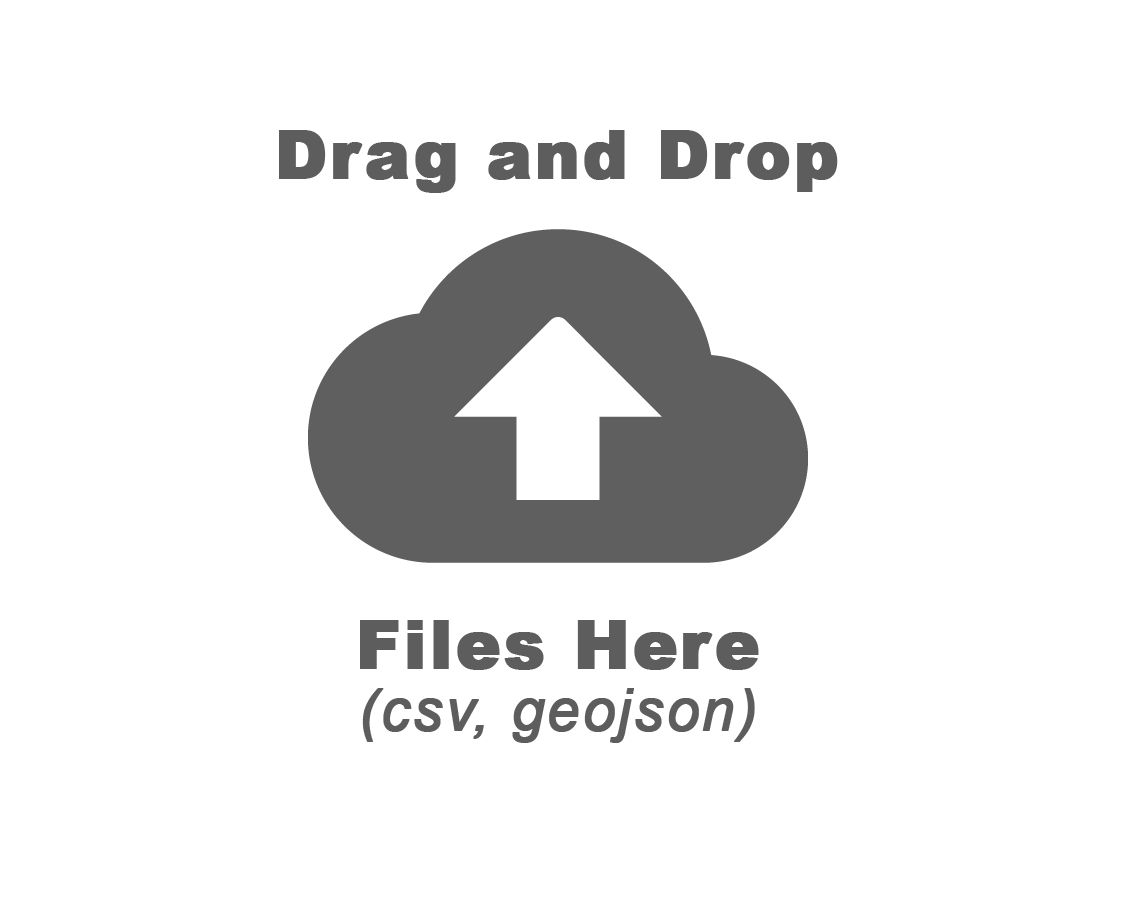
<style>
.page{position:relative;width:1125px;height:900px;background:#ffffff}
.page>*{position:absolute;margin:0}
.t1{font:66.7px "Arial-Black";letter-spacing:0.025em;color:#5e5d5d;font-weight:bold}
.t2{font:58.3px "Arial-ItalicMT";letter-spacing:0.025em;color:#5e5d5d;font-weight:bold}
</style>
<div class="page">
<p class="t1" style="left:279px;top:130px;width:559px;height:63px">Drag and Drop</p>
<p class="t1" style="left:360px;top:620px;width:399px;height:50px">Files Here</p>
<p class="t2" style="left:362px;top:688px;width:393px;height:55px">(csv, geojson)</p>
</div>
